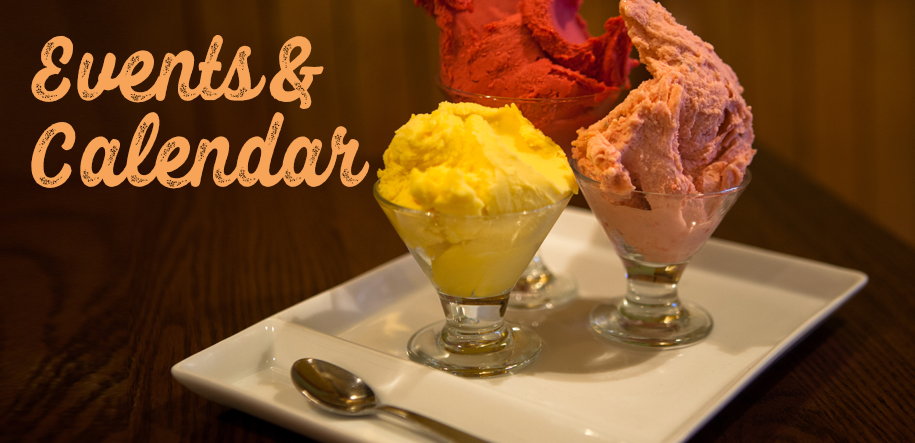
<style>
.page{position:relative;width:915px;height:443px}
.page>*{position:absolute;margin:0}
.t1{font:110.2px/86.7px "FelishaRough";color:#f7a459}
</style>
<div class="page">
<p class="t1" style="left:31px;top:35px;width:339px;height:154px">Events&amp;<br>Calendar</p>
</div>
